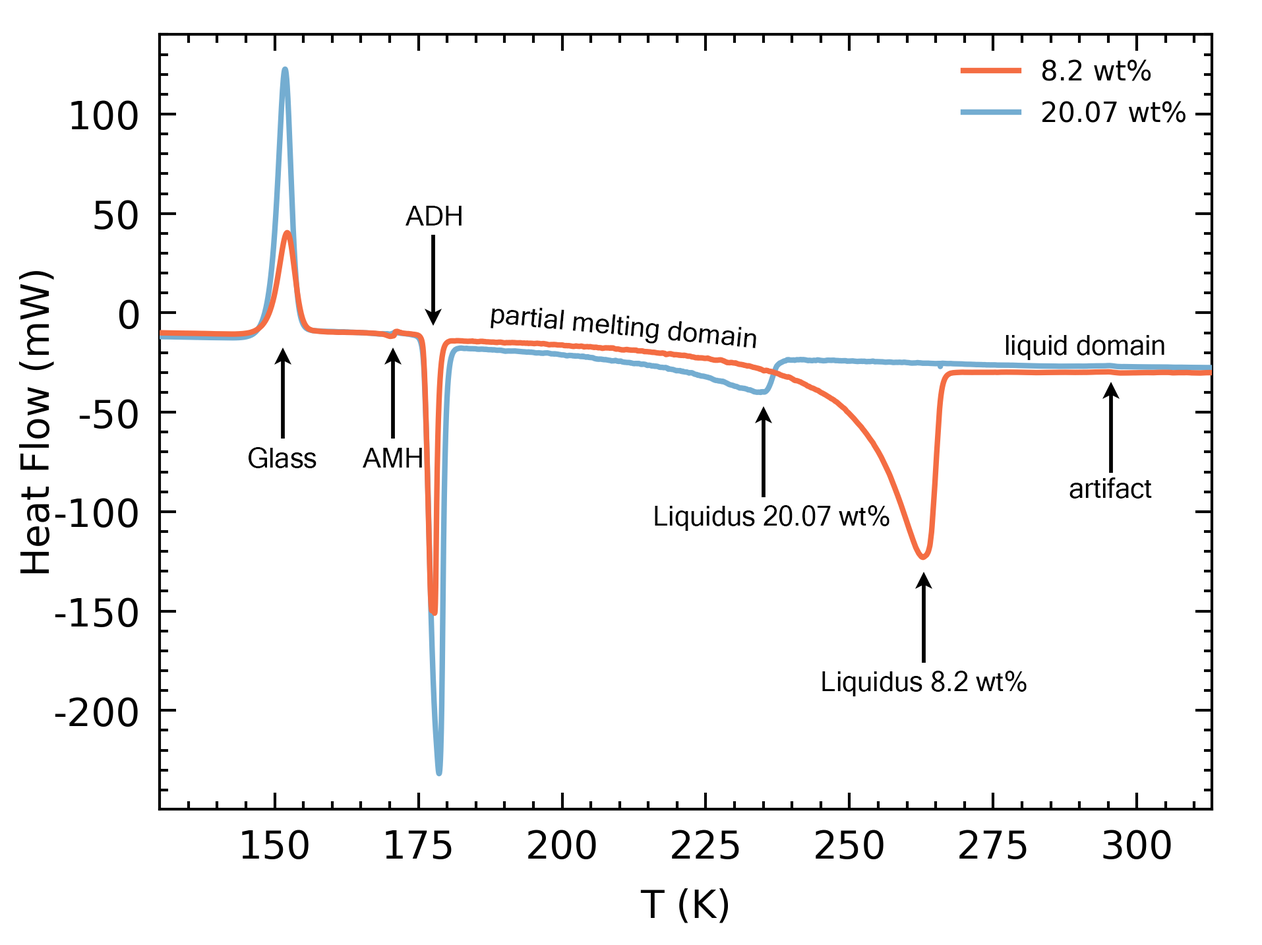
<style>
.page{position:relative;width:1262px;height:945px;background:#ffffff}
.page>*{position:absolute;margin:0}
.t1{font:27.5px "MicrosoftSansSerif";color:#000000}
</style>
<div class="page">
<p class="t1" style="left:406px;top:206px;width:56px;height:20px">ADH</p>
<p class="t1" style="left:491px;top:307px;width:265px;height:41px;rotate:5deg">partial melting domain</p>
<p class="t1" style="left:1006px;top:335px;width:158px;height:25px">liquid domain</p>
<p class="t1" style="left:249px;top:447px;width:67px;height:21px">Glass</p>
<p class="t1" style="left:363px;top:448px;width:59px;height:19px">AMH</p>
<p class="t1" style="left:1069px;top:477px;width:83px;height:21px">artifact</p>
<p class="t1" style="left:655px;top:505px;width:234px;height:26px">Liquidus 20.07 wt%</p>
<p class="t1" style="left:822px;top:671px;width:205px;height:25px">Liquidus 8.2 wt%</p>
</div>
